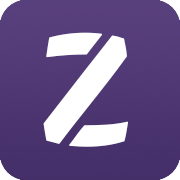
<style>
.page{position:relative;width:180px;height:180px}
.page>*{position:absolute;margin:0}
.t1{font:168px "Stencilia-Bold";color:#ffffff;text-transform:uppercase;scale:0.89 1}
</style>
<div class="page">
<p class="t1" style="left:43px;top:32px;width:85px;height:115px">Z</p>
</div>
